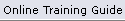
<style>
.page{position:relative;width:125px;height:21px;background:#e0e2eb}
.page>*{position:absolute;margin:0}
.t1{font:11px "Verdana";color:#000000;scale:0.91 1}
</style>
<div class="page">
<p class="t1" style="left:4px;top:5px;width:118px;height:11px">Online Training Guide</p>
</div>
